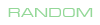
<style>
.page{position:relative;width:100px;height:25px;background:#ffffff}
.page>*{position:absolute;margin:0}
.t1{font:14px "MicrogrammaD-MediExte";letter-spacing:0.075em;color:#94d898}
</style>
<div class="page">
<p class="t1" style="left:8px;top:8px;width:85px;height:9px">RANDOM</p>
</div>
